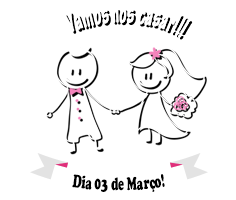
<style>
.page{position:relative;width:236px;height:200px;background:#ffffff}
.page>*{position:absolute;margin:0}
.t1{font:30px "TektonPro-BoldCond";letter-spacing:-0.01em;font-weight:bold;scale:0.6 1}
.t2{font:30px "BirdsofParadise-PersonaluseOnly";letter-spacing:-0.01em;font-weight:bold;scale:0.6 1}
.t3{font:18px "CooperBlackStd";letter-spacing:-0.01em;color:#000000;scale:0.6 1}
</style>
<div class="page">
<p class="t1" style="left:65px;top:10px;width:128px;height:30px"><span class="t2">                 </span>Vamos nos casar!!!</p>
<p class="t3" style="left:72px;top:174px;width:93px;height:18px">Dia 03 de Março!</p>
</div>
